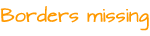
<style>
.page{position:relative;width:150px;height:36px;background:#ffffff}
.page>*{position:absolute;margin:0}
.t1{font:16px "ArchitectsDaughter";color:#ff9900}
</style>
<div class="page">
<p class="t1" style="left:0px;top:6px;width:149px;height:25px">Borders missing</p>
</div>
